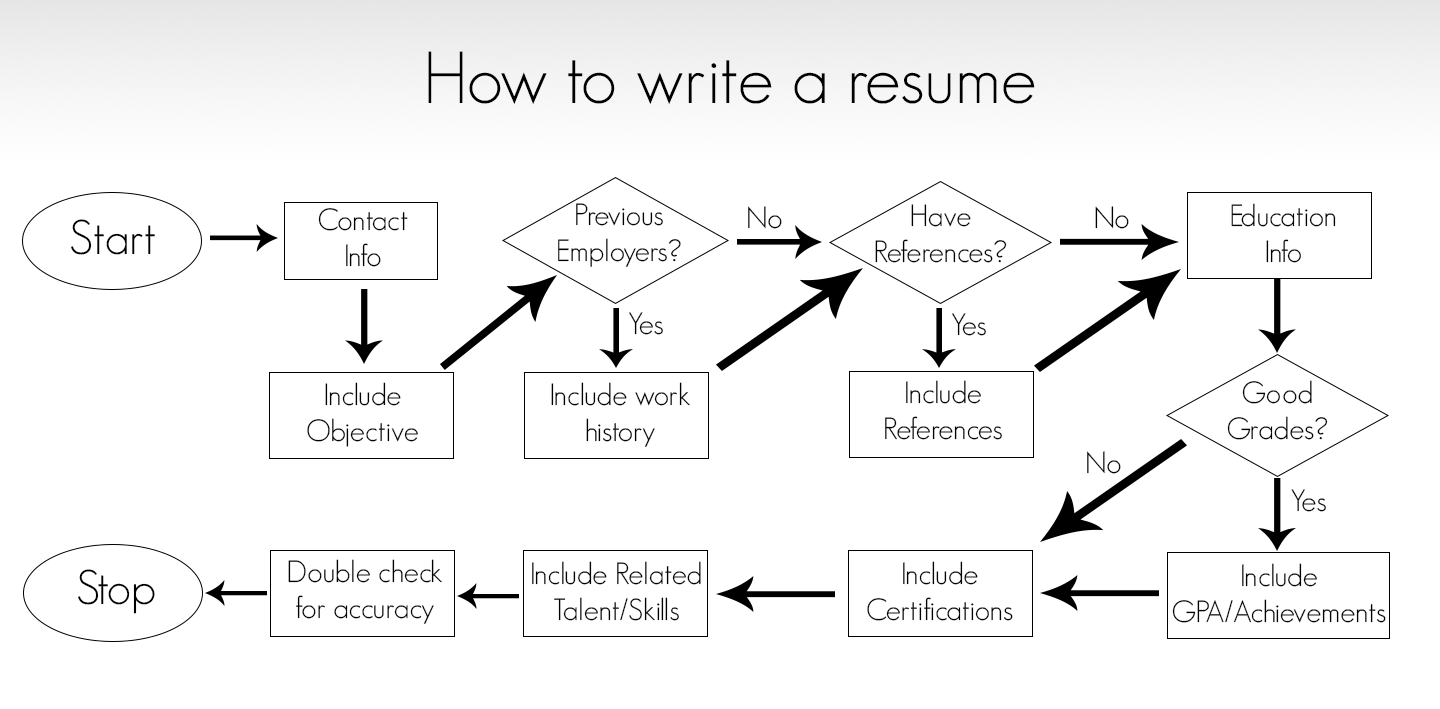
<style>
.page{position:relative;width:1440px;height:709px;background:#ffffff}
.page>*{position:absolute;margin:0}
.t1{font:72px "GeosansLight";color:#000000}
.t2{font:30px "GeosansLight";color:#000000}
.t3{font:48px "GeosansLight";color:#000000}
</style>
<div class="page">
<p class="t1" style="left:428px;top:51px;width:607px;height:54px">How to write a resume</p>
<p class="t2" style="left:318px;top:208px;width:90px;height:59px;text-align:center">Contact<br>Info</p>
<p class="t2" style="left:558px;top:203px;width:123px;height:64px;text-align:center">Previous<br>Employers?</p>
<p class="t2" style="left:748px;top:206px;width:34px;height:23px">No</p>
<p class="t2" style="left:875px;top:204px;width:132px;height:59px;text-align:center">Have<br>References?</p>
<p class="t2" style="left:1095px;top:206px;width:34px;height:23px">No</p>
<p class="t2" style="left:1231px;top:203px;width:105px;height:60px;text-align:center">Education<br>Info</p>
<p class="t3" style="left:71px;top:219px;width:84px;height:36px">Start</p>
<p class="t2" style="left:629px;top:312px;width:34px;height:23px">Yes</p>
<p class="t2" style="left:952px;top:313px;width:34px;height:23px">Yes</p>
<p class="t2" style="left:307px;top:382px;width:111px;height:65px;text-align:center">Include<br>Objective</p>
<p class="t2" style="left:551px;top:382px;width:139px;height:65px;text-align:center">Include work<br>history</p>
<p class="t2" style="left:885px;top:380px;width:117px;height:60px;text-align:center">Include<br>References</p>
<p class="t2" style="left:1227px;top:380px;width:101px;height:60px;text-align:center">Good<br>Grades?</p>
<p class="t2" style="left:1087px;top:451px;width:34px;height:23px">No</p>
<p class="t2" style="left:1291px;top:489px;width:35px;height:23px">Yes</p>
<p class="t3" style="left:78px;top:569px;width:77px;height:45px">Stop</p>
<p class="t2" style="left:288px;top:559px;width:154px;height:65px;text-align:center">Double check<br>for accuracy</p>
<p class="t2" style="left:532px;top:561px;width:169px;height:60px;text-align:center">Include Related<br>Talent/Skills</p>
<p class="t2" style="left:867px;top:561px;width:146px;height:60px;text-align:center">Include<br>Certifications</p>
<p class="t2" style="left:1172px;top:563px;width:214px;height:60px;text-align:center">Include<br>GPA/Achievements</p>
</div>
